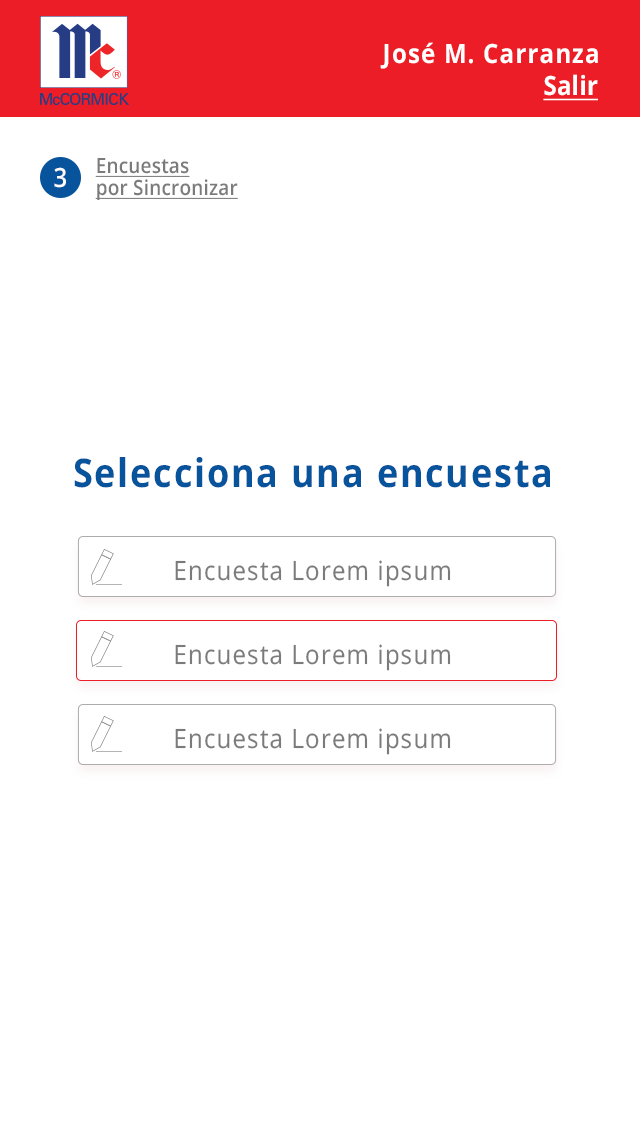
<style>
.page{position:relative;width:640px;height:1136px;background:#ffffff}
.page>*{position:absolute;margin:0}
.t1{font:26.4px "OpenSans-Bold";letter-spacing:0.05em;color:#ffffff;scale:0.91 1}
.t2{font:26.4px "OpenSans-Bold";letter-spacing:0.01em;color:#ffffff;text-decoration:underline;scale:0.91 1}
.t3{font:20.9px/22px "OpenSans-SemiBold";letter-spacing:0.01em;color:#7b7b7b;text-decoration:underline;scale:0.91 1}
.t4{font:26.4px "OpenSans-SemiBold";letter-spacing:0.05em;color:#ffffff;scale:0.91 1}
.t5{font:39.6px "OpenSans-Bold";letter-spacing:0.05em;color:#07549c;scale:0.91 1}
.t6{font:26.4px "OpenSans-Regular";letter-spacing:0.05em;color:#7b7b7b;scale:0.91 1}
</style>
<div class="page">
<p class="t1" style="left:380px;top:42px;width:218px;height:27px">José M. Carranza</p>
<p class="t2" style="left:543px;top:74px;width:55px;height:27px">Salir</p>
<p class="t3" style="left:95px;top:158px;width:143px;height:42px">Encuestas<br>por Sincronizar</p>
<p class="t4" style="left:54px;top:167px;width:12px;height:21px">3</p>
<p class="t5" style="left:74px;top:457px;width:476px;height:31px">Selecciona una encuesta</p>
<p class="t6" style="left:175px;top:560px;width:276px;height:27px">Encuesta Lorem ipsum</p>
<p class="t6" style="left:175px;top:644px;width:276px;height:27px">Encuesta Lorem ipsum</p>
<p class="t6" style="left:175px;top:728px;width:276px;height:27px">Encuesta Lorem ipsum</p>
</div>
